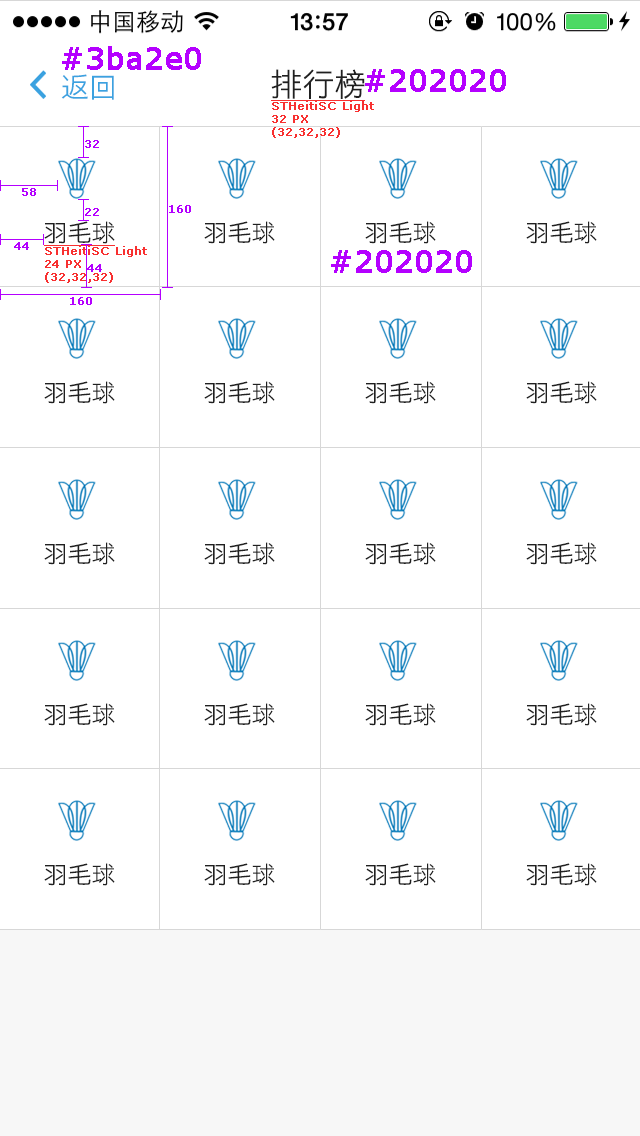
<style>
.page{position:relative;width:640px;height:1136px;background:#ffffff}
.page>*{position:absolute;margin:0}
.t1{font:30px "Verdana";color:#b400ff;font-weight:bold}
.t2{font:28px "STHeitiSC-Light";color:#3ba2e0}
.t3{font:32px "STHeitiSC-Light";color:#202020}
.t4{font:11px "Verdana";color:#f83030;font-weight:bold}
.t5{font:11px "Verdana";color:#b400ff;font-weight:bold}
.t6{font:24px "STHeitiSC-Light";color:#202020}
</style>
<div class="page">
<p class="t1" style="left:62px;top:46px;width:139px;height:24px">#3ba2e0</p>
<p class="t2" style="left:61px;top:74px;width:53px;height:26px">返回</p>
<p class="t3" style="left:271px;top:69px;width:94px;height:30px">排行榜</p>
<p class="t1" style="left:365px;top:69px;width:141px;height:23px">#202020</p>
<p class="t4" style="left:272px;top:101px;width:102px;height:37px">STHeitiSC Light<br>32 PX<br>(32,32,32)</p>
<p class="t5" style="left:85px;top:140px;width:14px;height:8px">32</p>
<p class="t5" style="left:22px;top:188px;width:14px;height:8px">58</p>
<p class="t5" style="left:85px;top:208px;width:14px;height:8px">22</p>
<p class="t5" style="left:169px;top:205px;width:22px;height:8px">160</p>
<p class="t6" style="left:44px;top:221px;width:71px;height:23px">羽毛球</p>
<p class="t6" style="left:204px;top:221px;width:71px;height:23px">羽毛球</p>
<p class="t6" style="left:365px;top:221px;width:71px;height:23px">羽毛球</p>
<p class="t6" style="left:526px;top:221px;width:71px;height:23px">羽毛球</p>
<p class="t5" style="left:14px;top:242px;width:15px;height:8px">44</p>
<p class="t4" style="left:45px;top:246px;width:102px;height:37px">STHeitiSC Light<br>24 PX<br>(32,32,32)</p>
<p class="t1" style="left:331px;top:250px;width:141px;height:23px">#202020</p>
<p class="t5" style="left:87px;top:264px;width:15px;height:8px">44</p>
<p class="t5" style="left:70px;top:297px;width:22px;height:8px">160</p>
<p class="t6" style="left:44px;top:381px;width:71px;height:23px">羽毛球</p>
<p class="t6" style="left:204px;top:381px;width:71px;height:23px">羽毛球</p>
<p class="t6" style="left:365px;top:381px;width:71px;height:23px">羽毛球</p>
<p class="t6" style="left:526px;top:381px;width:71px;height:23px">羽毛球</p>
<p class="t6" style="left:44px;top:542px;width:71px;height:23px">羽毛球</p>
<p class="t6" style="left:204px;top:542px;width:71px;height:23px">羽毛球</p>
<p class="t6" style="left:365px;top:542px;width:71px;height:23px">羽毛球</p>
<p class="t6" style="left:526px;top:542px;width:71px;height:23px">羽毛球</p>
<p class="t6" style="left:44px;top:703px;width:71px;height:23px">羽毛球</p>
<p class="t6" style="left:204px;top:703px;width:71px;height:23px">羽毛球</p>
<p class="t6" style="left:365px;top:703px;width:71px;height:23px">羽毛球</p>
<p class="t6" style="left:526px;top:703px;width:71px;height:23px">羽毛球</p>
<p class="t6" style="left:44px;top:863px;width:71px;height:23px">羽毛球</p>
<p class="t6" style="left:204px;top:863px;width:71px;height:23px">羽毛球</p>
<p class="t6" style="left:365px;top:863px;width:71px;height:23px">羽毛球</p>
<p class="t6" style="left:526px;top:863px;width:71px;height:23px">羽毛球</p>
</div>
